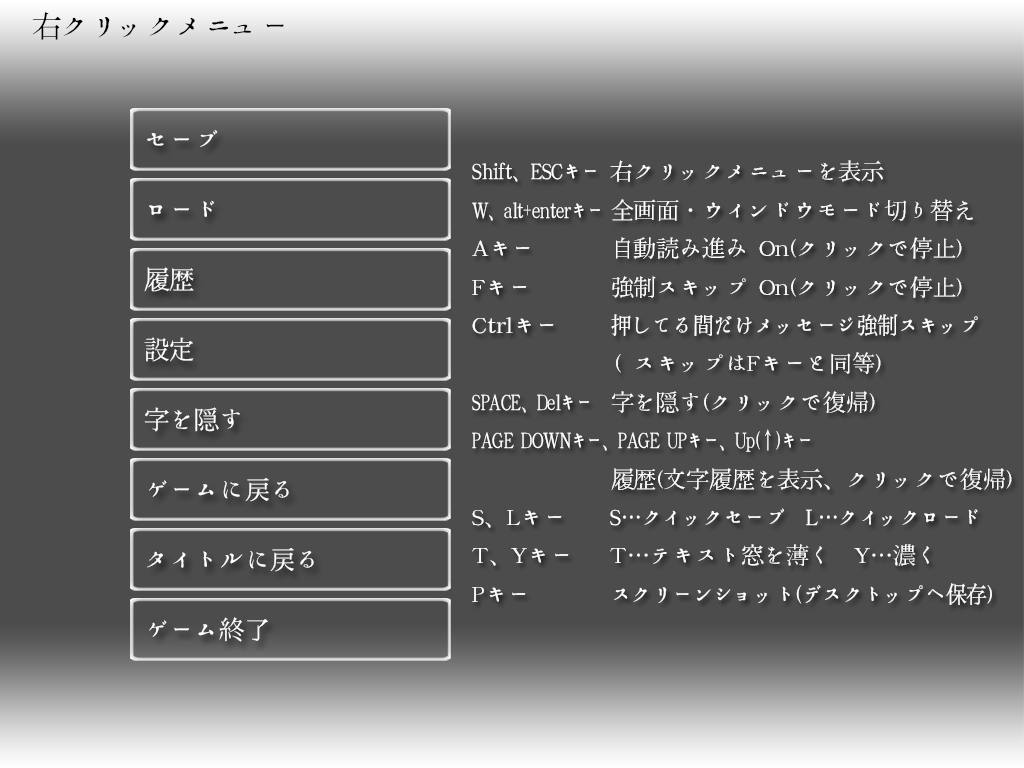
<style>
.page{position:relative;width:1024px;height:768px;background:#4c4c4c}
.page>*{position:absolute;margin:0}
.t1{font:30px "XANO-mincho-U32";letter-spacing:-0.05em;color:#000000}
.t2{font:25.2px/70px "XANO-mincho-U32";color:#ffffff}
.t3{font:23px/38.4px "XANO-mincho-U32";letter-spacing:-0.01em;color:#ffffff}
.t4{font:23px/38.4px "XANO-mincho-U32";letter-spacing:-0.01em;color:#ffffff;scale:0.8 1}
.t5{font:23px/38.4px "XANO-mincho-U32";letter-spacing:-0.01em;color:#ffffff;scale:0.7 1}
.t6{font:23px/38.4px "XANO-mincho-U32";letter-spacing:-0.01em;color:#ffffff;scale:0.9 1}
</style>
<div class="page">
<p class="t1" style="left:32px;top:12px;width:252px;height:28px">右クリックメニュー</p>
<p class="t2" style="left:144px;top:130px;width:170px;height:512px">セーブ<br>ロード<br>履歴<br>設定<br>字を隠す<br>ゲームに戻る<br>タイトルに戻る<br>ゲーム終了</p>
<p class="t3" style="left:472px;top:160px;width:540px;height:445px"><span class="t4">Shift、ESCキー</span> 右クリックメニューを表示<br><span class="t5">W、alt+enterキー</span>  全画面・ウインドウモード切り替え<br>Aキー   自動読み進み On(クリックで停止)<br>Fキー   強制スキップ On(クリックで停止)<br>Ctrlキー   <span class="t6">押してる間だけメッセージ強制スキップ<br></span>   （スキップはFキーと同等）<br><span class="t5">SPACE、Delキー</span>  字を隠す(クリックで復帰)<br><span class="t5">PAGE DOWNキー、PAGE UPキー、Up(↑)キー<br></span>   履歴(文字履歴を表示、クリックで復帰)<br>S、Lキー <span class="t6">S…クイックセーブ　L…クイックロード<br></span>T、Yキー T…テキスト窓を薄く  Y…濃く<br>Pキー   <span class="t6">スクリーンショット(デスクトップへ保存)</span></p>
</div>
